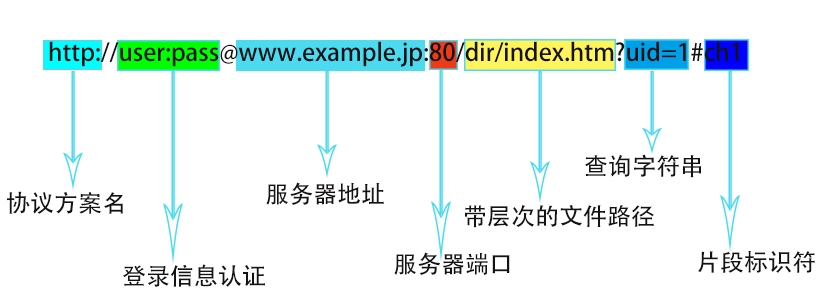
<style>
.page{position:relative;width:831px;height:306px;background:#ffffff}
.page>*{position:absolute;margin:0}
.t1{font:24px "AdobeHeitiStd-Regular";color:#141212}
</style>
<div class="page">
<p class="t1" style="left:49px;top:41px;width:690px;height:26px">http://user:pass@www.example.jp:80/dir/index.htm?uid=1#ch1</p>
<p class="t1" style="left:585px;top:154px;width:117px;height:24px">查询字符串</p>
<p class="t1" style="left:266px;top:182px;width:118px;height:23px">服务器地址</p>
<p class="t1" style="left:6px;top:191px;width:117px;height:23px">协议方案名</p>
<p class="t1" style="left:465px;top:205px;width:189px;height:23px">带层次的文件路径</p>
<p class="t1" style="left:394px;top:252px;width:116px;height:23px">服务器端口</p>
<p class="t1" style="left:698px;top:251px;width:117px;height:22px">片段标识符</p>
<p class="t1" style="left:123px;top:264px;width:142px;height:23px">登录信息认证</p>
</div>
